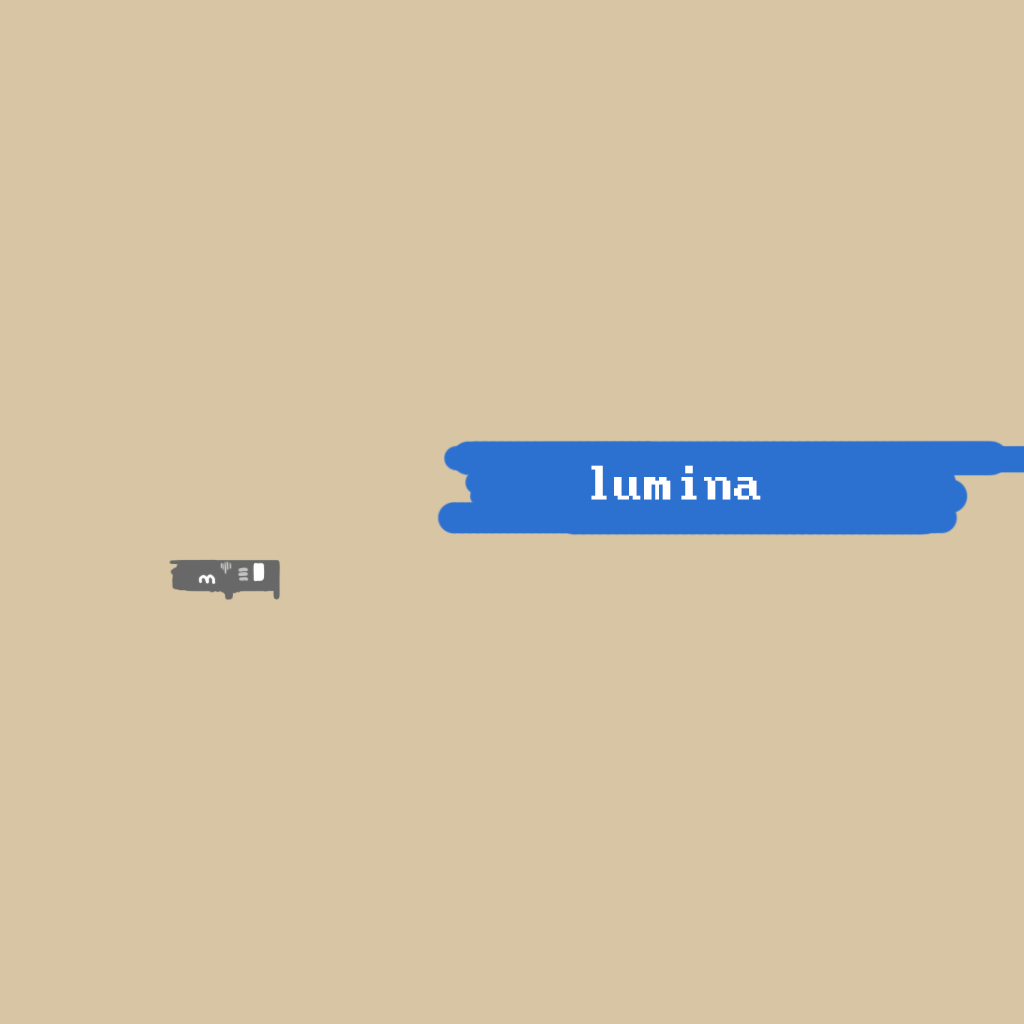
<style>
.page{position:relative;width:1024px;height:1024px;background:#d7c5a4}
.page>*{position:absolute;margin:0}
.t1{font:60px "DOSMyungjo";color:#ffffff}
</style>
<div class="page">
<p class="t1" style="left:591px;top:465px;width:170px;height:35px">lumina</p>
</div>
